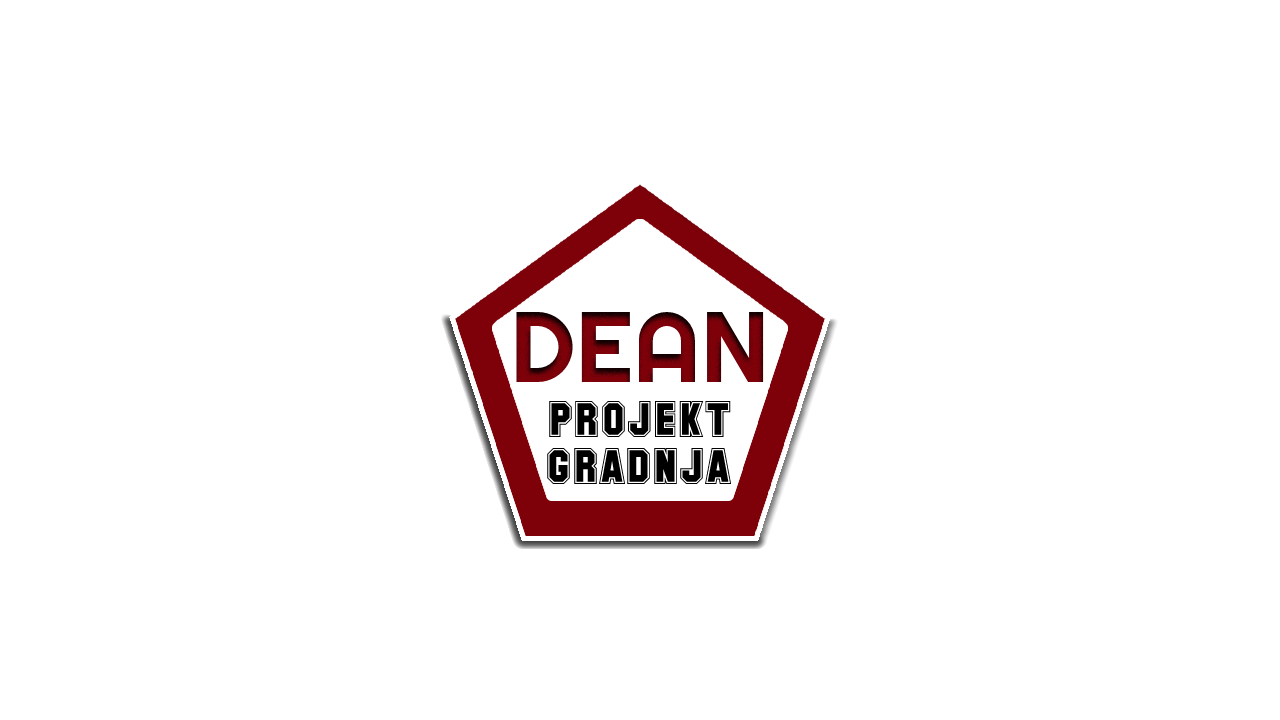
<style>
.page{position:relative;width:1280px;height:720px;background:#ffffff}
.page>*{position:absolute;margin:0}
.t1{font:100px "Righteous-Regular";color:#7e010a}
.t2{font:45px "SFCollegiate";color:#000000}
</style>
<div class="page">
<p class="t1" style="left:516px;top:311px;width:248px;height:71px">DEAN</p>
<p class="t2" style="left:549px;top:401px;width:182px;height:36px">PROJEKT</p>
<p class="t2" style="left:547px;top:448px;width:185px;height:36px">GRADNJA</p>
</div>
